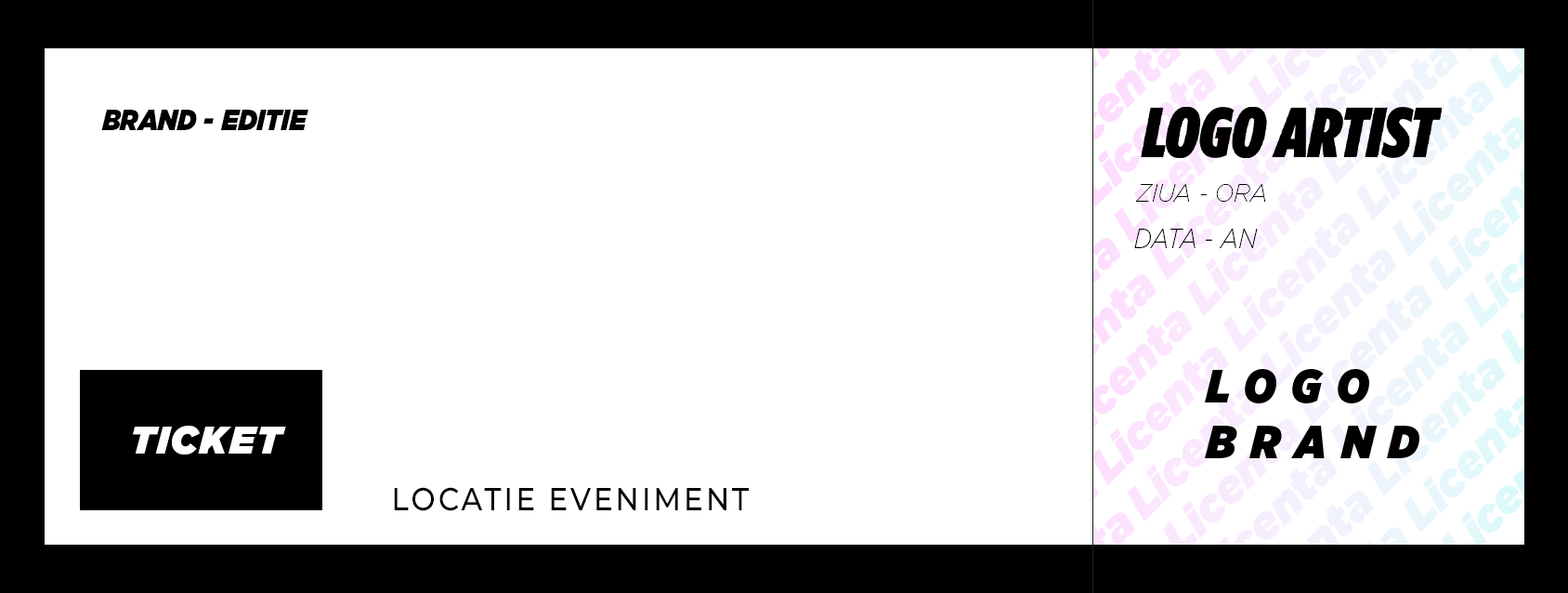
<style>
.page{position:relative;width:1568px;height:593px;background:#ffffff}
.page>*{position:absolute;margin:0}
.t1{font:28.6px "Gotham-UltraItalic";color:#000000;scale:0.87 1}
.t2{font:24.4px "Gotham-ThinItalic";color:#000000;scale:0.94 1}
.t3{font:27.8px "Gotham-XLightItalic";color:#000000;scale:0.84 1}
.t4{font:38.7px "Gotham-UltraItalic";letter-spacing:0.05em;color:#ffffff}
.t5{font:31.8px "Montserrat-Medium";letter-spacing:0.1em;color:#000000;scale:0.9 1}
</style>
<div class="page">
<p class="t1" style="left:101px;top:110px;width:207px;height:20px">BRAND - EDITIE</p>
<p class="t2" style="left:1136px;top:184px;width:129px;height:18px">ZIUA - ORA</p>
<p class="t3" style="left:1134px;top:229px;width:124px;height:19px">DATA - AN</p>
<p class="t4" style="left:133px;top:425px;width:153px;height:29px">TICKET</p>
<p class="t5" style="left:394px;top:487px;width:355px;height:24px">LOCATIE EVENIMENT</p>
</div>
